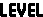
<style>
.page{position:relative;width:43px;height:17px;background:#ffffff}
.page>*{position:absolute;margin:0}
.t1{font:18px "Big-Apple-3PM";color:#000000}
</style>
<div class="page">
<p class="t1" style="left:0px;top:3px;width:43px;height:14px">LEVEL</p>
</div>
